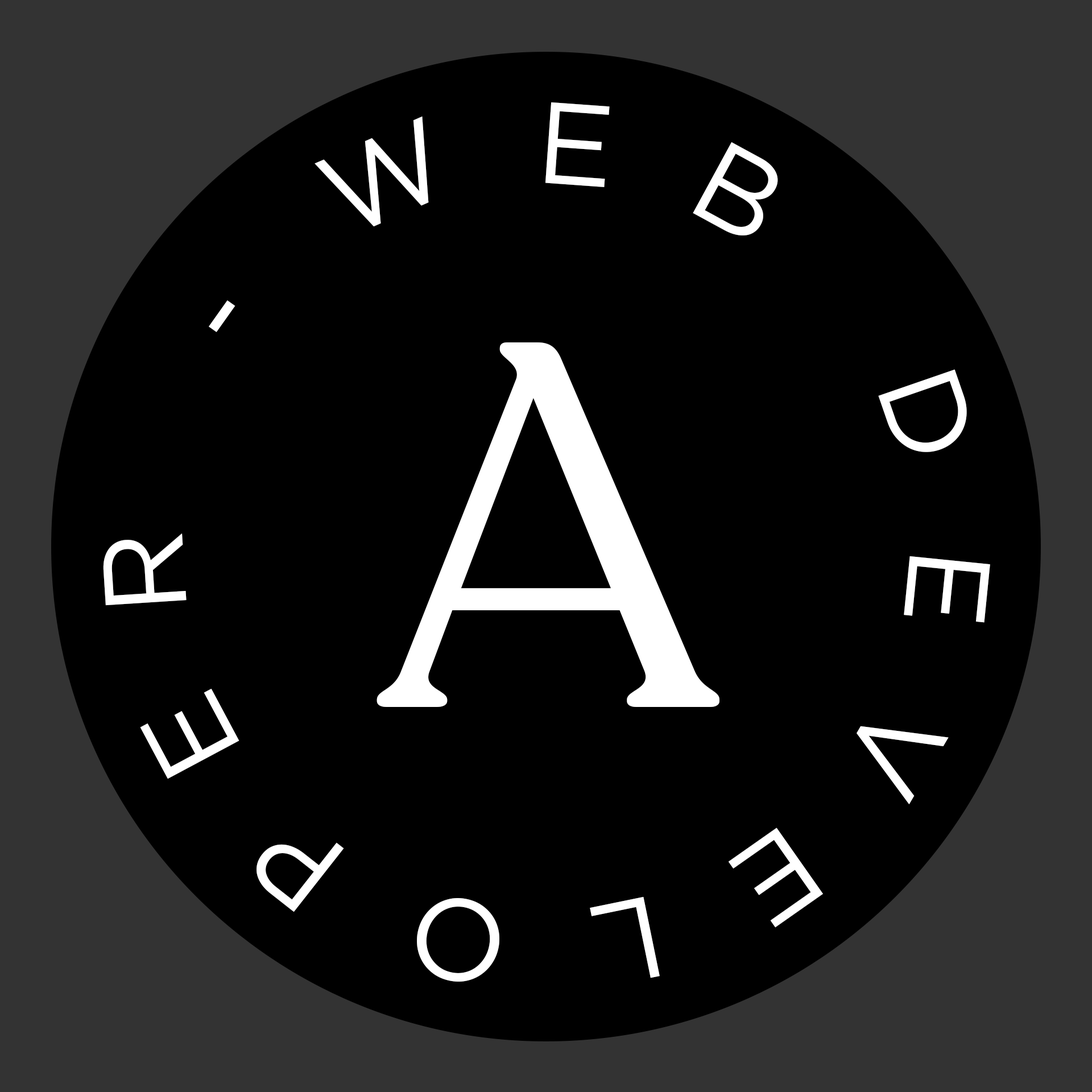
<style>
.page{position:relative;width:1092px;height:1092px;background:#000000}
.page>*{position:absolute;margin:0}
.t1{font:115.2px "Gotham-Book";letter-spacing:0.64em;color:#ffffff}
.t2{font:513.3px "Recoleta-RegularDEMO";color:#ffffff}
</style>
<div class="page">
<p class="t1" style="left:103px;top:102px;width:887px;height:880px">WEB DEVELOPER -</p>
<p class="t2" style="left:377px;top:342px;width:342px;height:365px">A</p>
</div>
